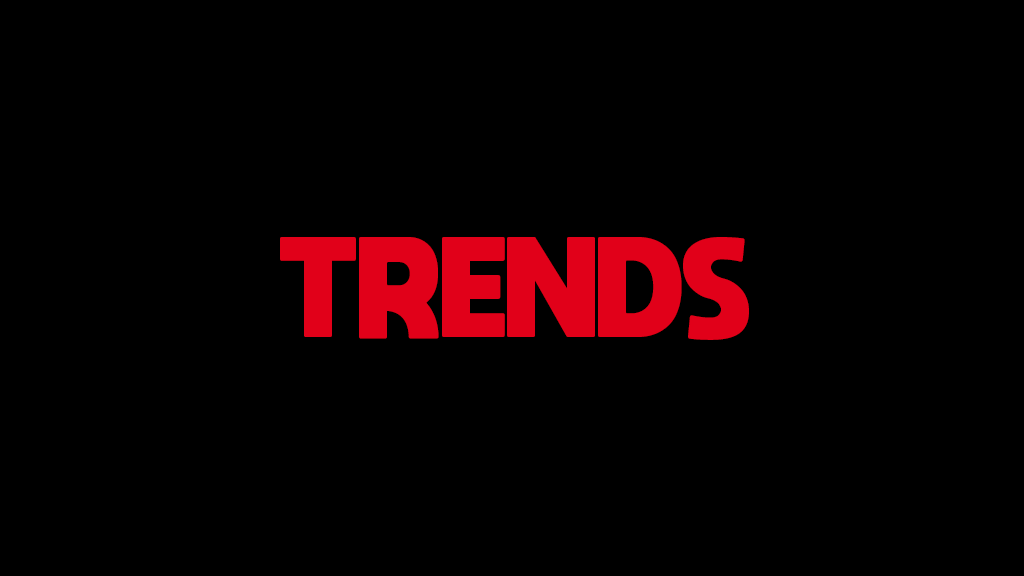
<style>
.page{position:relative;width:1024px;height:576px;background:#000000}
.page>*{position:absolute;margin:0}
.t1{font:100px "moon_get-Heavy";color:#e10019}
</style>
<div class="page">
<p class="t1" style="left:280px;top:237px;width:469px;height:103px">TRENDS</p>
</div>
